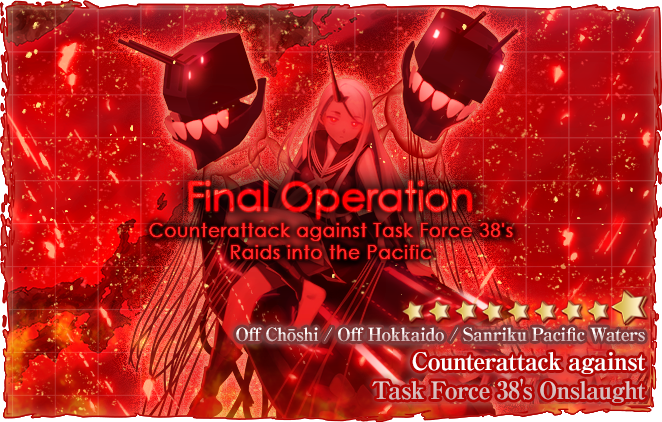
<style>
.page{position:relative;width:662px;height:422px}
.page>*{position:absolute;margin:0}
.t1{font:18px "RyuminPro-ExBold";letter-spacing:-0.04em}
.t2{font:24px/29px "RyuminPro-ExBold";letter-spacing:-0.04em}
</style>
<div class="page">
<p class="t1" style="left:236px;top:327px;width:409px;height:15px">Off Chōshi / Off Hokkaido / Sanriku Pacific Waters</p>
<p class="t2" style="left:372px;top:352px;width:274px;height:51px;text-align:right">Counterattack against<br>Task Force 38's Onslaught</p>
</div>
